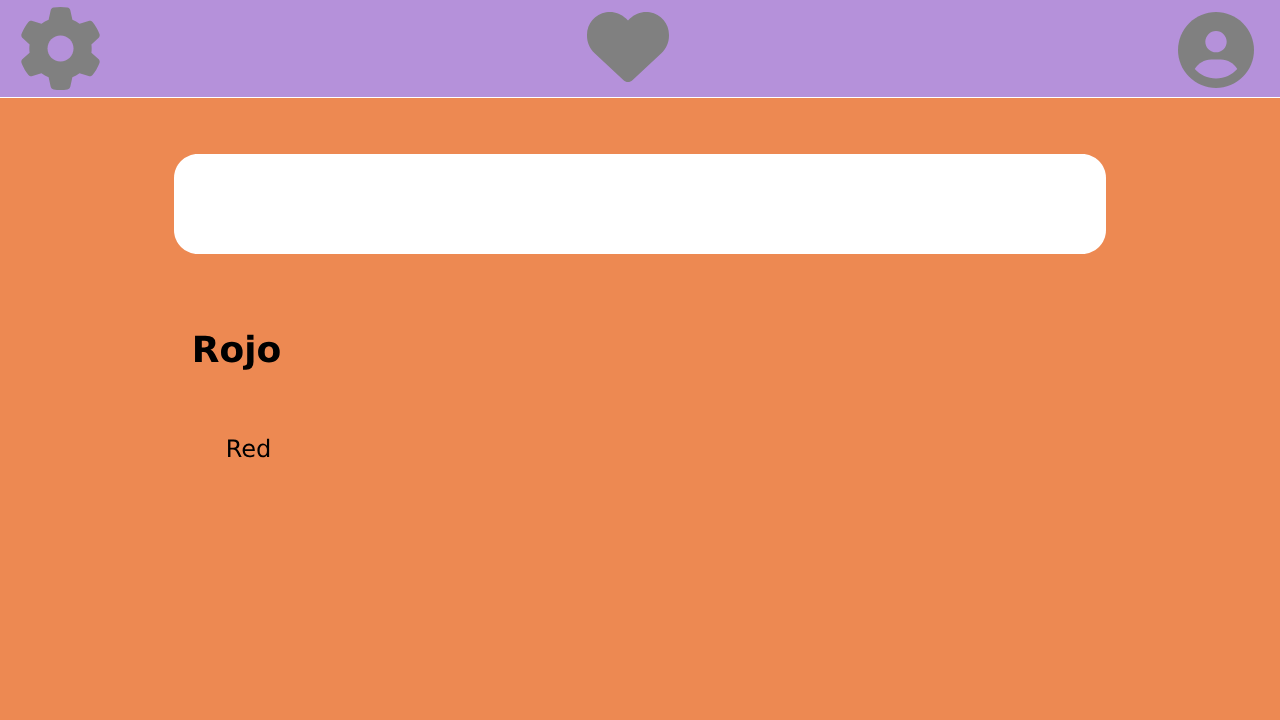
<style>
.page{position:relative;width:1280px;height:720px;background:#ed8952}
.page>*{position:absolute;margin:0}
.t1{font:36px "DejaVuSans-Bold";color:#000000}
.t2{font:24px "DejaVuSans";color:#000000}
</style>
<div class="page">
<p class="t1" style="left:195px;top:334px;width:85px;height:36px">Rojo</p>
<p class="t2" style="left:228px;top:438px;width:42px;height:20px">Red</p>
</div>
